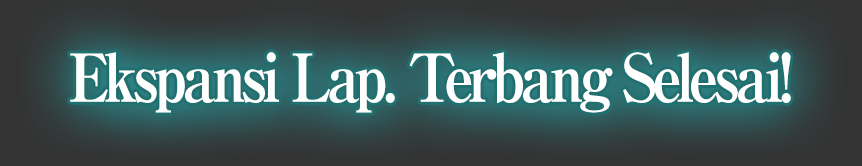
<style>
.page{position:relative;width:862px;height:166px}
.page>*{position:absolute;margin:0}
.t1{font:66px "RyuminPro-ExBold";letter-spacing:-0.08em;color:#ffffff;scale:0.9 1}
</style>
<div class="page">
<p class="t1" style="left:70px;top:52px;width:721px;height:61px">Ekspansi Lap. Terbang Selesai!</p>
</div>
